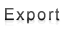
<style>
.page{position:relative;width:65px;height:32px;background:#ffffff}
.page>*{position:absolute;margin:0}
.t1{font:16.7px "ArialMT";letter-spacing:0.1em;color:#434343}
</style>
<div class="page">
<p class="t1" style="left:5px;top:8px;width:55px;height:16px">Export</p>
<p class="t1" style="left:5px;top:8px;width:55px;height:16px">Export</p>
</div>
